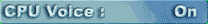
<style>
.page{position:relative;width:208px;height:24px;background:#8cb5bd}
.page>*{position:absolute;margin:0}
.t1{font:15.8px "Arial-Black"}
</style>
<div class="page">
<p class="t1" style="left:4px;top:5px;width:100px;height:12px">CPU Voice :</p>
<p class="t1" style="left:174px;top:5px;width:23px;height:12px">On</p>
</div>
